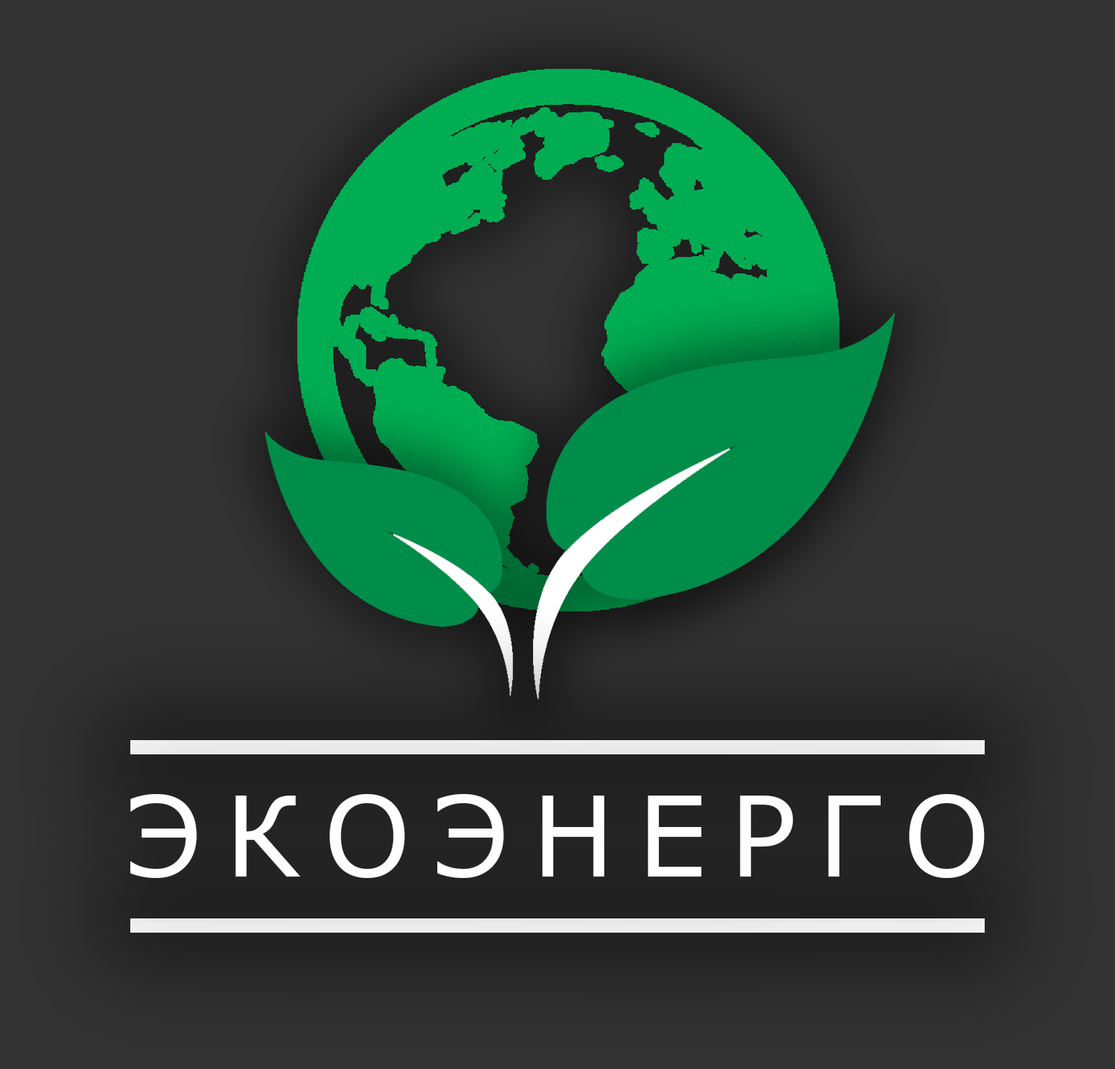
<style>
.page{position:relative;width:1115px;height:1069px;background:#333333}
.page>*{position:absolute;margin:0}
.t1{font:110.6px "Verdana";letter-spacing:0.2em;color:#ffffff}
</style>
<div class="page">
<p class="t1" style="left:130px;top:794px;width:855px;height:84px">ЭКОЭНЕРГО</p>
</div>
